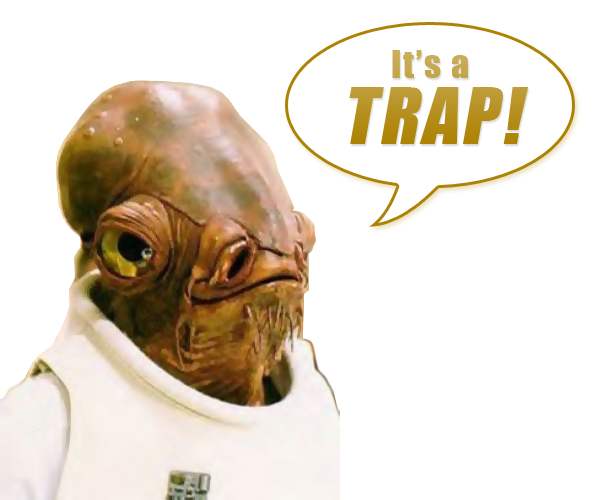
<style>
.page{position:relative;width:600px;height:500px;background:#ffffff}
.page>*{position:absolute;margin:0}
.t1{font:36px/66px "Impact";letter-spacing:0.05em}
.t2{font:72px/66px "Impact";letter-spacing:0.05em;text-transform:uppercase;font-style:italic}
</style>
<div class="page">
<p class="t1" style="left:349px;top:50px;width:180px;height:94px;text-align:center">It’s a<br><span class="t2">Trap!</span></p>
</div>
